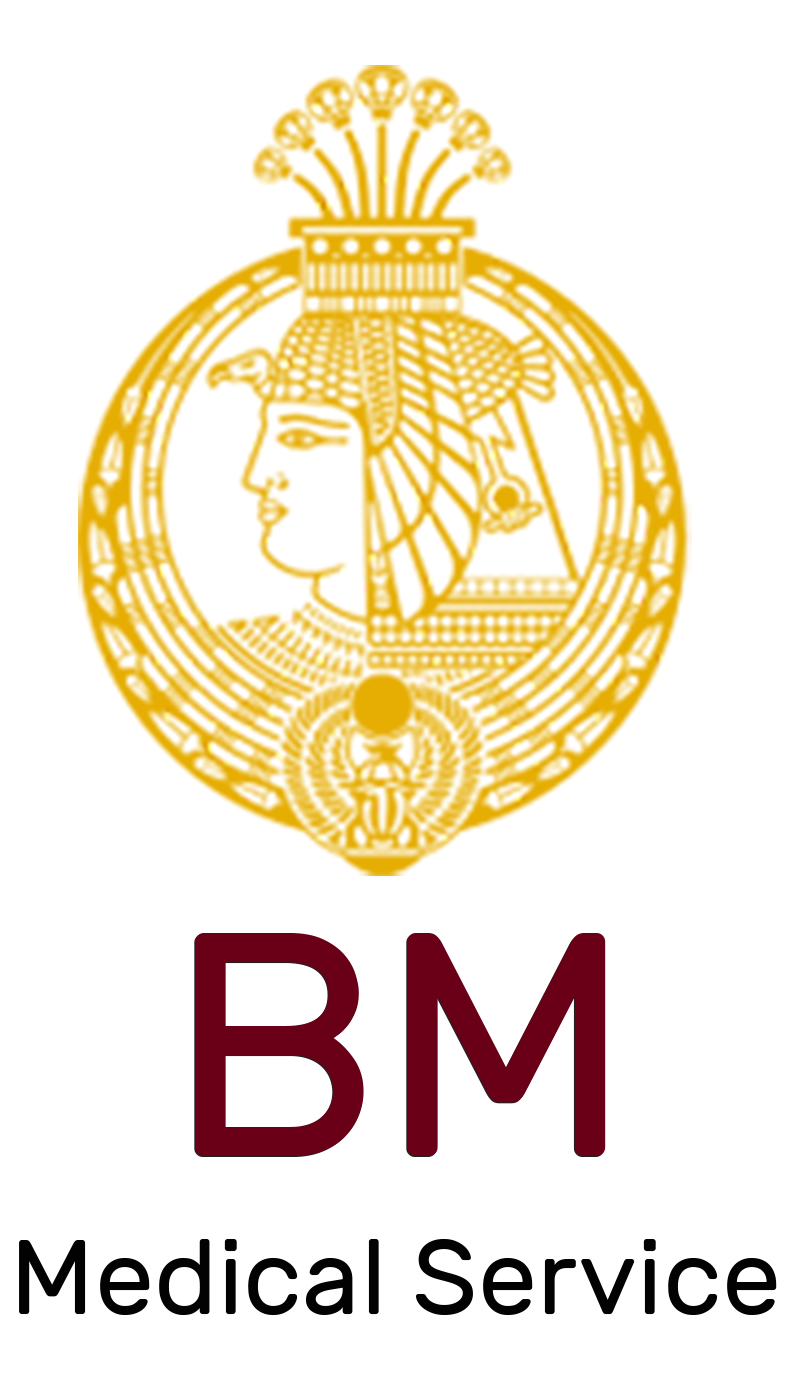
<style>
.page{position:relative;width:800px;height:1395px;background:#ffffff}
.page>*{position:absolute;margin:0}
.t1{font:317.8px "Rubik-Regular";color:#690017}
.t2{font:106.2px "Rubik-Regular";color:#020202}
</style>
<div class="page">
<p class="t1" style="left:195px;top:933px;width:411px;height:223px">BM</p>
<p class="t2" style="left:19px;top:1239px;width:758px;height:76px">Medical Service</p>
</div>
